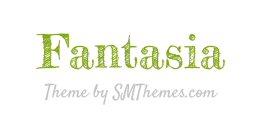
<style>
.page{position:relative;width:264px;height:131px;background:#ffffff}
.page>*{position:absolute;margin:0}
.t1{font:45.8px "FrederickatheGreat-Regular";color:#82a714}
.t2{font:18.3px "Satisfy";color:#c3c3c3}
</style>
<div class="page">
<p class="t1" style="left:36px;top:33px;width:189px;height:37px">Fantasia</p>
<p class="t2" style="left:44px;top:83px;width:174px;height:22px">Theme by SMThemes.com</p>
</div>
